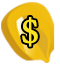
<style>
.page{position:relative;width:60px;height:66px;background:#ffffff}
.page>*{position:absolute;margin:0}
.t1{font:47px "AdobeDevanagari-Regular";color:#fbe320;font-weight:bold}
</style>
<div class="page">
<p class="t1" style="left:22px;top:17px;width:16px;height:30px">$</p>
</div>
